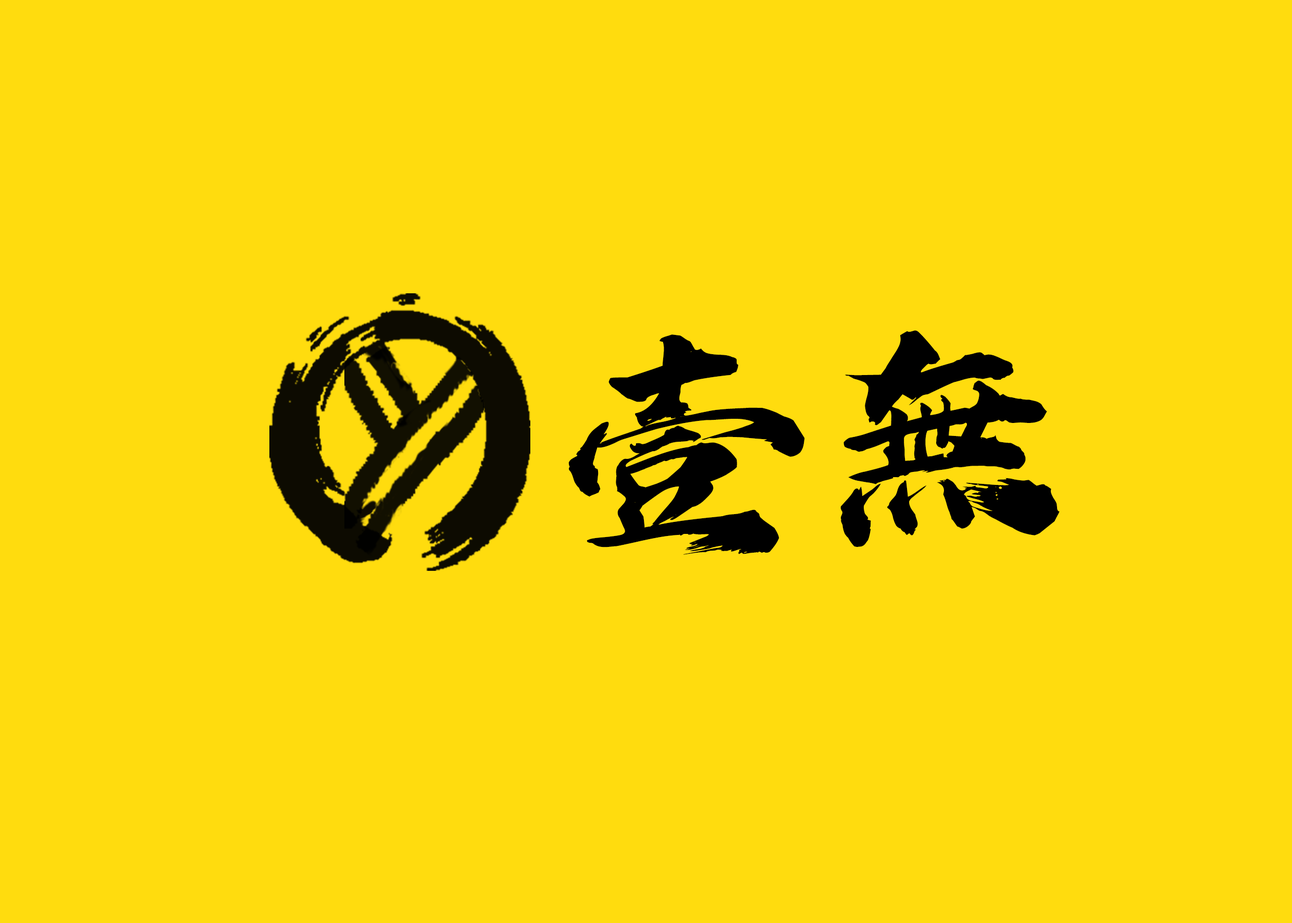
<style>
.page{position:relative;width:1292px;height:923px;background:#ffdc0e}
.page>*{position:absolute;margin:0}
.t1{font:253px "iFontshangtiantengfeiti";letter-spacing:-0.05em;color:#000000;text-transform:uppercase;scale:1.11 1}
</style>
<div class="page">
<p class="t1" style="left:568px;top:330px;width:492px;height:225px;rotate:-2deg">壹無</p>
</div>
